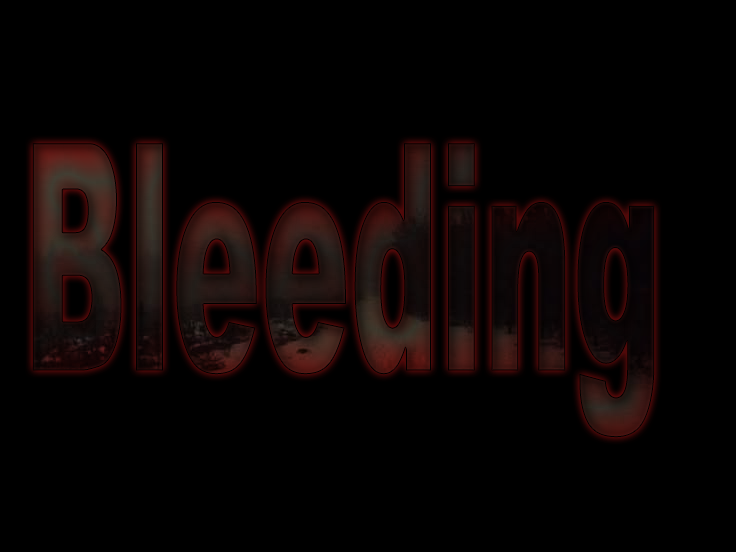
<style>
.page{position:relative;width:736px;height:552px;background:#000000}
.page>*{position:absolute;margin:0}
.t1{font:317.3px "Arial-Black";scale:0.42 1}
</style>
<div class="page">
<p class="t1" style="left:32px;top:143px;width:623px;height:295px">Bleeding</p>
</div>
